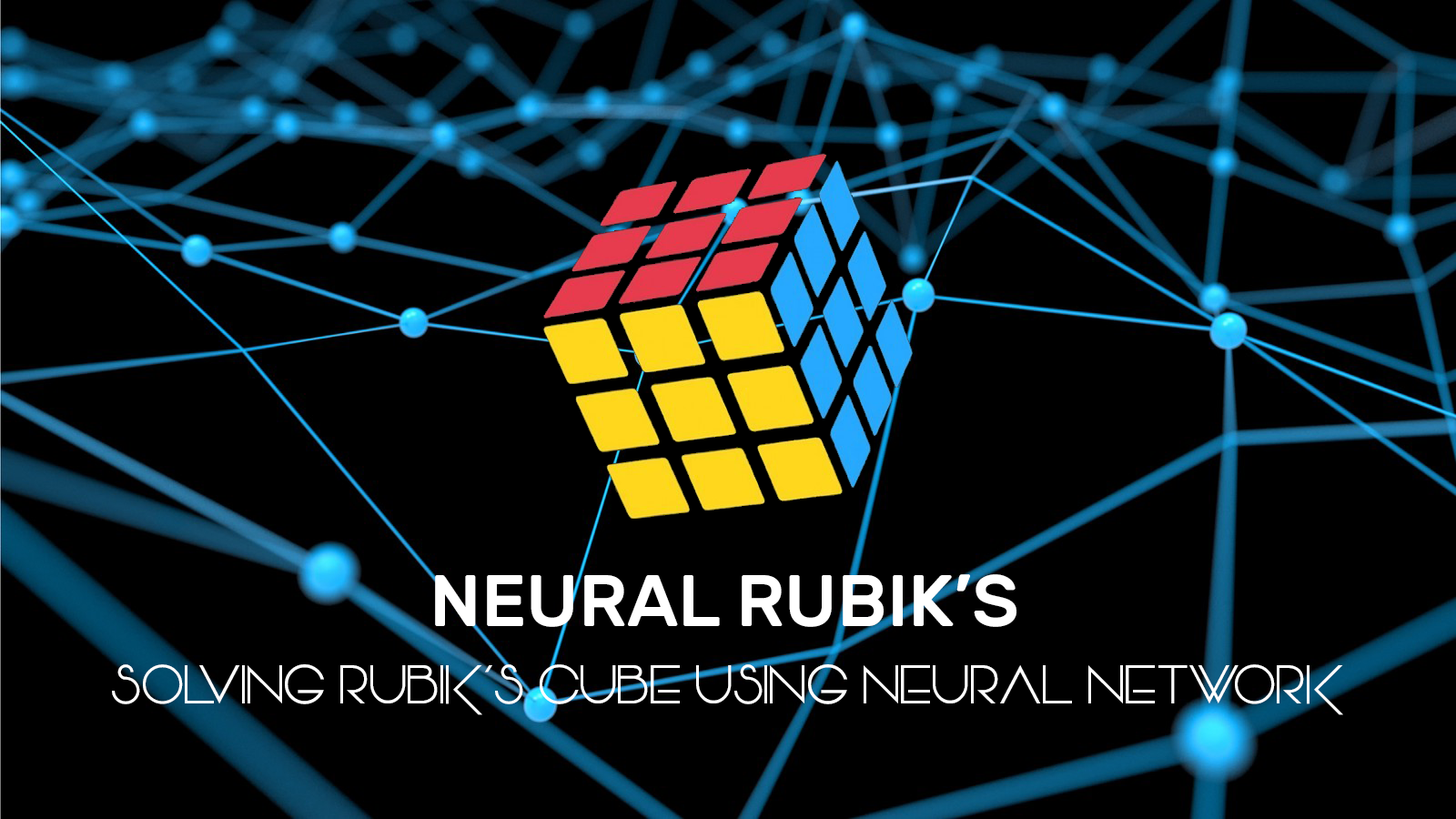
<style>
.page{position:relative;width:1456px;height:819px;background:#000000}
.page>*{position:absolute;margin:0}
.t1{font:72.8px "Rubik-Medium";color:#ffffff}
.t2{font:54.6px "Vonique64";color:#ffffff}
</style>
<div class="page">
<p class="t1" style="left:435px;top:574px;width:581px;height:53px">NEURAL RUBIK’S</p>
<p class="t2" style="left:112px;top:664px;width:1231px;height:51px">SOLVING RUBIK’S CUBE USING NEURAL NETWORK</p>
</div>
